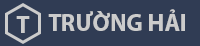
<style>
.page{position:relative;width:200px;height:46px;background:#303c54}
.page>*{position:absolute;margin:0}
.t1{font:24px "MyriadPro-Bold";color:#cccccc}
</style>
<div class="page">
<p class="t1" style="left:16px;top:16px;width:14px;height:17px">T</p>
<p class="t1" style="left:48px;top:9px;width:137px;height:22px">TRƯỜNG HẢI</p>
</div>
